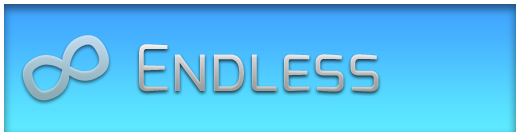
<style>
.page{position:relative;width:520px;height:136px}
.page>*{position:absolute;margin:0}
.t1{font:64px "Exo-Regular";font-variant:small-caps}
</style>
<div class="page">
<p class="t1" style="left:139px;top:44px;width:240px;height:48px">Endless</p>
</div>
